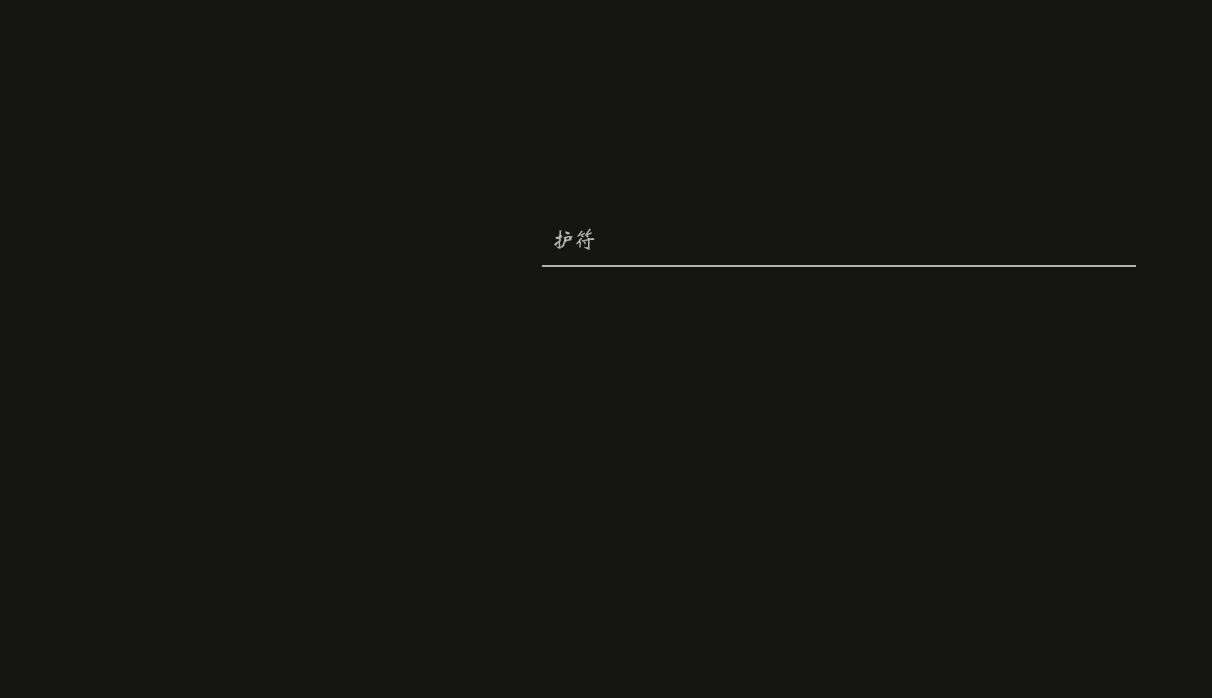
<style>
.page{position:relative;width:1212px;height:698px;background:#151611}
.page>*{position:absolute;margin:0}
.t1{font:24px "STXinwei";letter-spacing:-0.108em;color:#b2b3ad}
</style>
<div class="page">
<p class="t1" style="left:554px;top:228px;width:41px;height:22px">护符</p>
</div>
